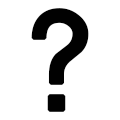
<style>
.page{position:relative;width:120px;height:120px;background:#ffffff}
.page>*{position:absolute;margin:0}
.t1{font:136px "Gautami";color:#010101;font-weight:bold}
</style>
<div class="page">
<p class="t1" style="left:31px;top:8px;width:58px;height:104px">?</p>
</div>
